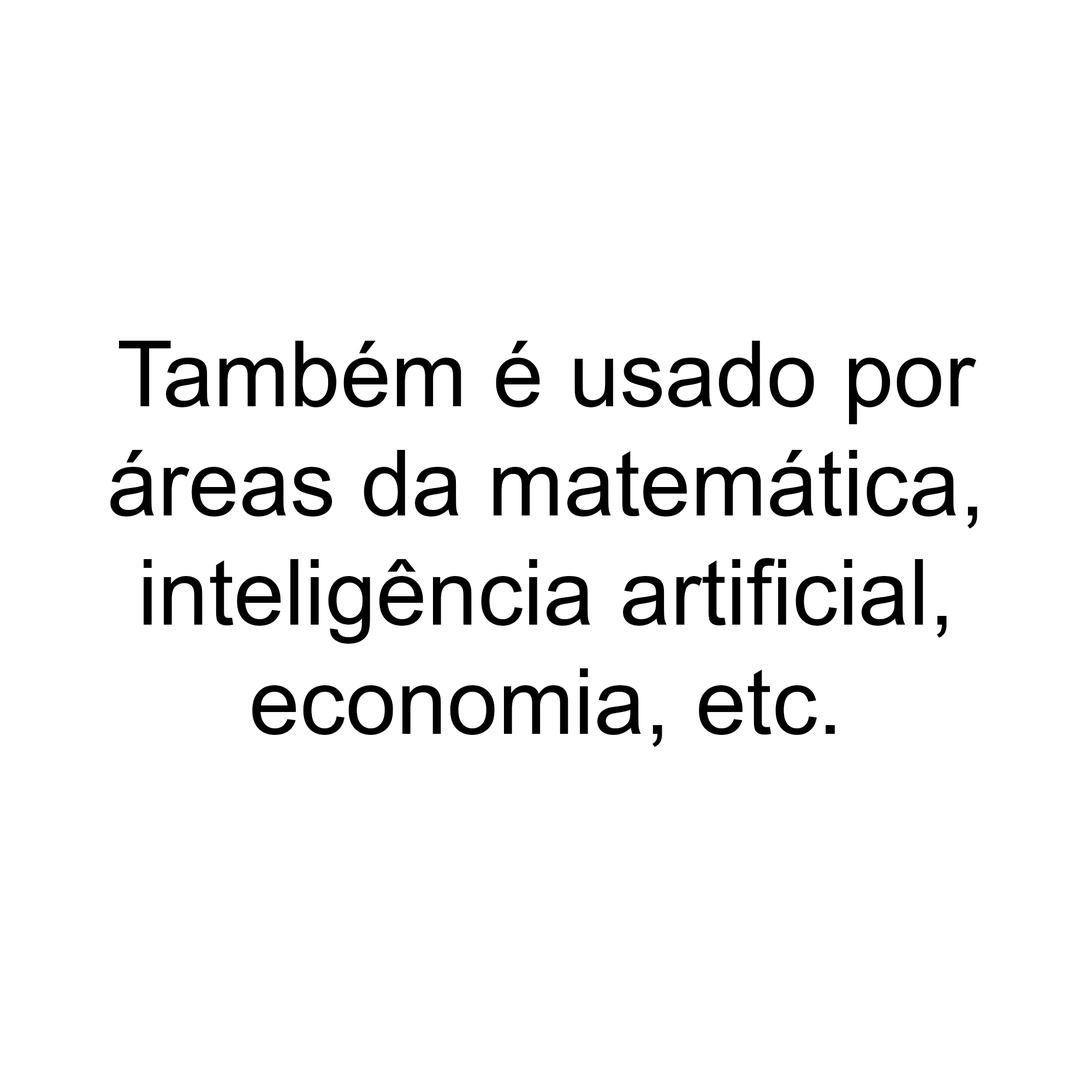
<style>
.page{position:relative;width:1092px;height:1092px;background:#ffffff}
.page>*{position:absolute;margin:0}
.t1{font:91px "ArialMT";color:#000000}
</style>
<div class="page">
<p class="t1" style="left:110px;top:341px;width:867px;height:406px;text-align:center">Também é usado por<br>áreas da matemática,<br>inteligência artificial,<br>economia, etc.</p>
</div>
